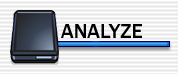
<style>
.page{position:relative;width:178px;height:74px}
.page>*{position:absolute;margin:0}
.t1{font:21px "FranklinGothic-Medium";color:#000000}
</style>
<div class="page">
<p class="t1" style="left:61px;top:24px;width:81px;height:14px">ANALYZE</p>
</div>
